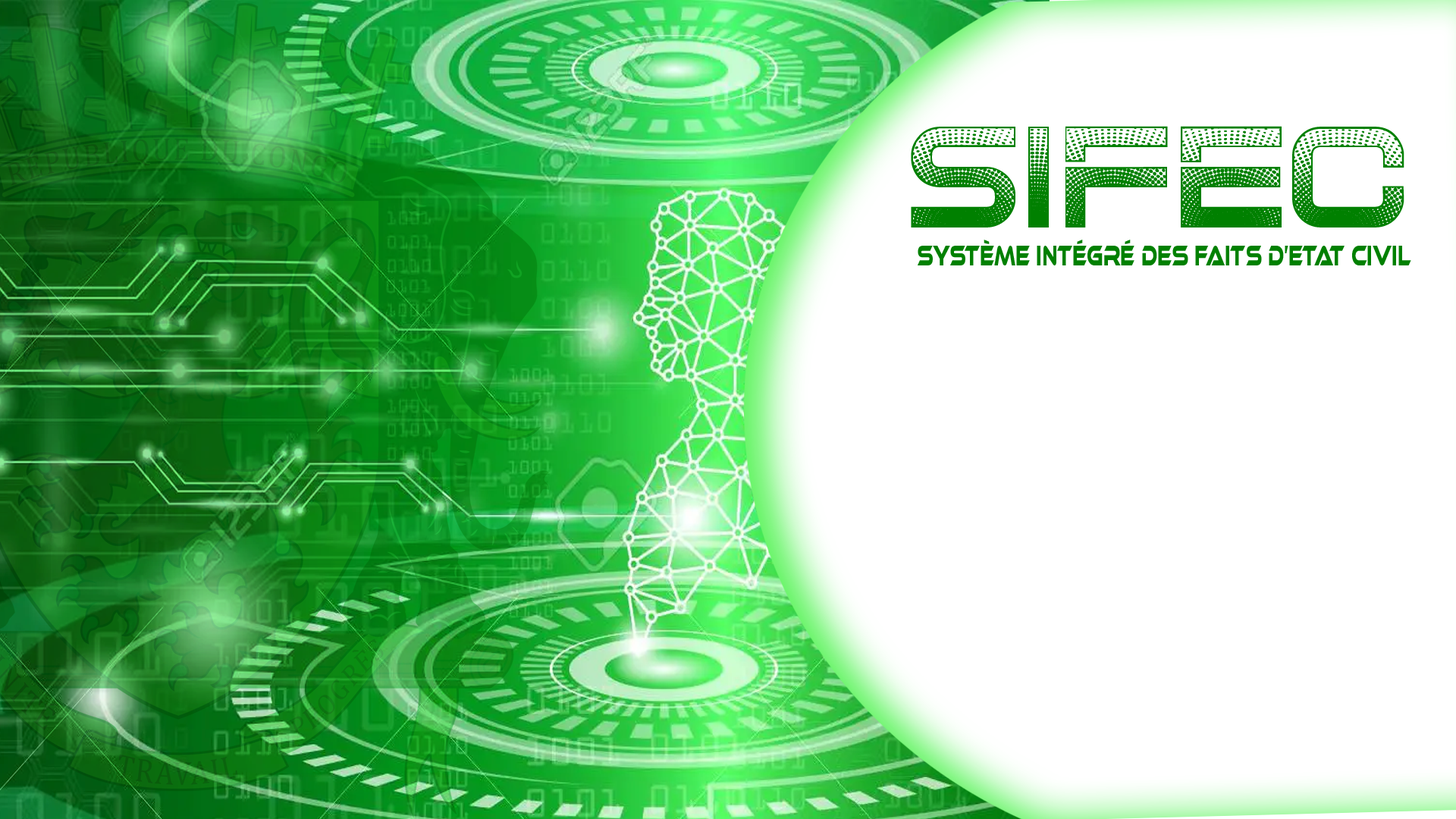
<style>
.page{position:relative;width:1456px;height:819px;background:#ffffff}
.page>*{position:absolute;margin:0}
.t1{font:151.7px "Slight-Regular";color:#008000}
.t2{font:29.5px "EthnocentricRg-Regular";color:#008000;scale:0.57 1}
</style>
<div class="page">
<p class="t1" style="left:911px;top:126px;width:493px;height:101px">SIFEC</p>
<p class="t2" style="left:918px;top:240px;width:493px;height:25px">système intégré des faits d’etat civil</p>
</div>
